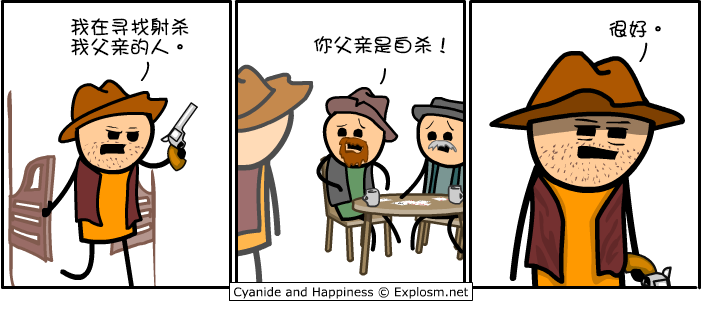
<style>
.page{position:relative;width:701px;height:319px;background:#ffffff}
.page>*{position:absolute;margin:0}
.t1{font:20px/20px "DFGirl";color:#000000}
.t2{font:20px "DFGirl";color:#000000}
</style>
<div class="page">
<p class="t1" style="left:70px;top:18px;width:119px;height:38px">我在寻找射杀<br>我父亲的人。</p>
<p class="t2" style="left:609px;top:20px;width:52px;height:18px">很好。</p>
<p class="t2" style="left:313px;top:35px;width:132px;height:19px">你父亲是自杀！</p>
</div>
